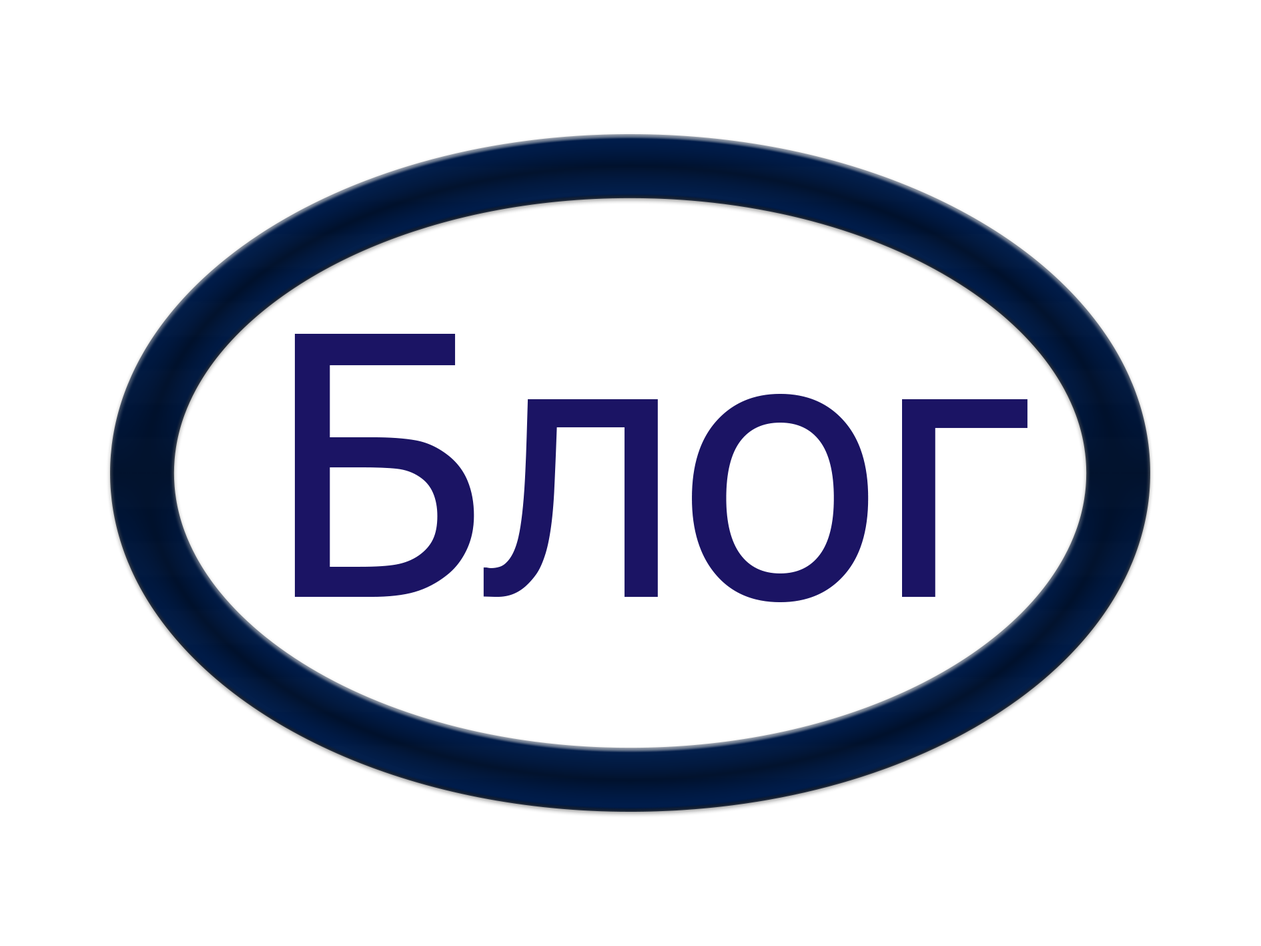
<style>
.page{position:relative;width:1261px;height:946px;background:#ffffff}
.page>*{position:absolute;margin:0}
.t1{font:361.4px "Tahoma";color:#1b1464}
.t2{font:417px "Microsoft-Himalaya";color:#1b1464}
</style>
<div class="page">
<p class="t1" style="left:294px;top:334px;width:734px;height:268px"><span class="t2"> </span>Блог</p>
</div>
